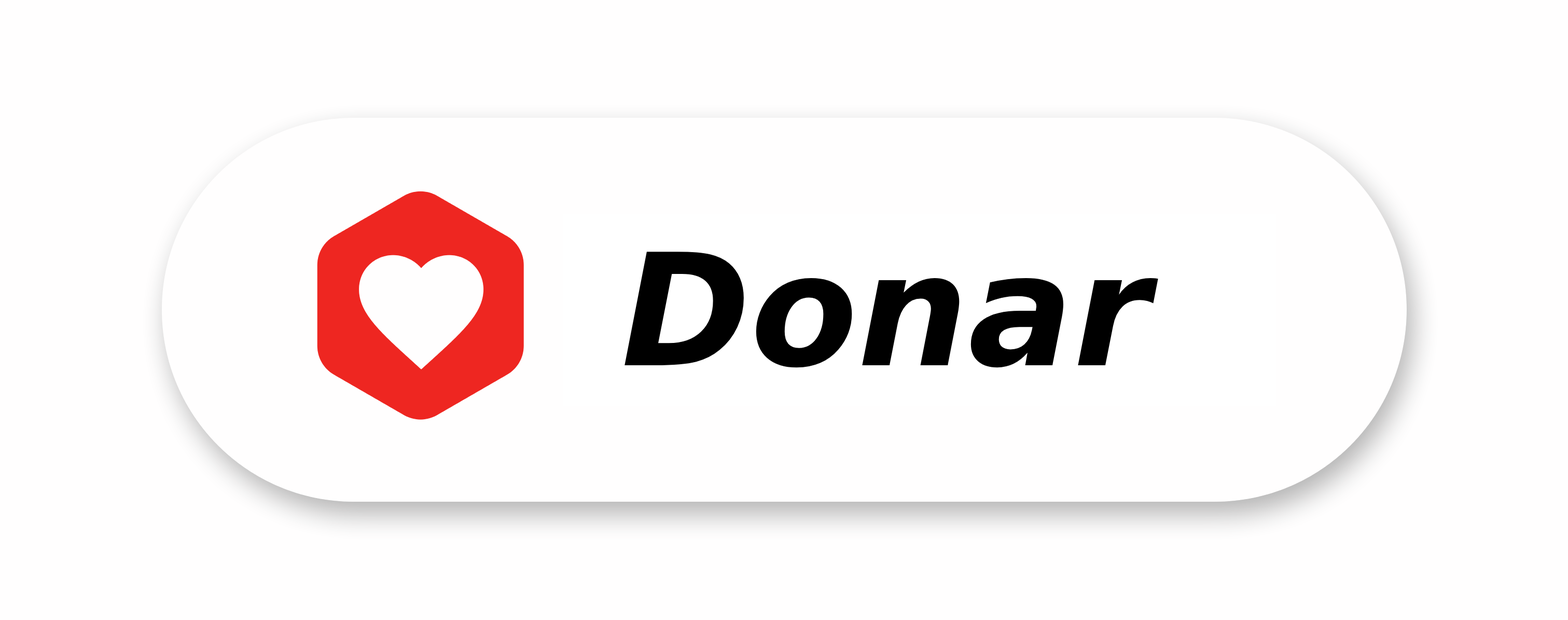
<style>
.page{position:relative;width:1568px;height:620px;background:#fffefe}
.page>*{position:absolute;margin:0}
.t1{font:155.6px "DejaVuSans-BoldOblique";color:#000000}
</style>
<div class="page">
<p class="t1" style="left:625px;top:252px;width:533px;height:116px">Donar</p>
</div>
